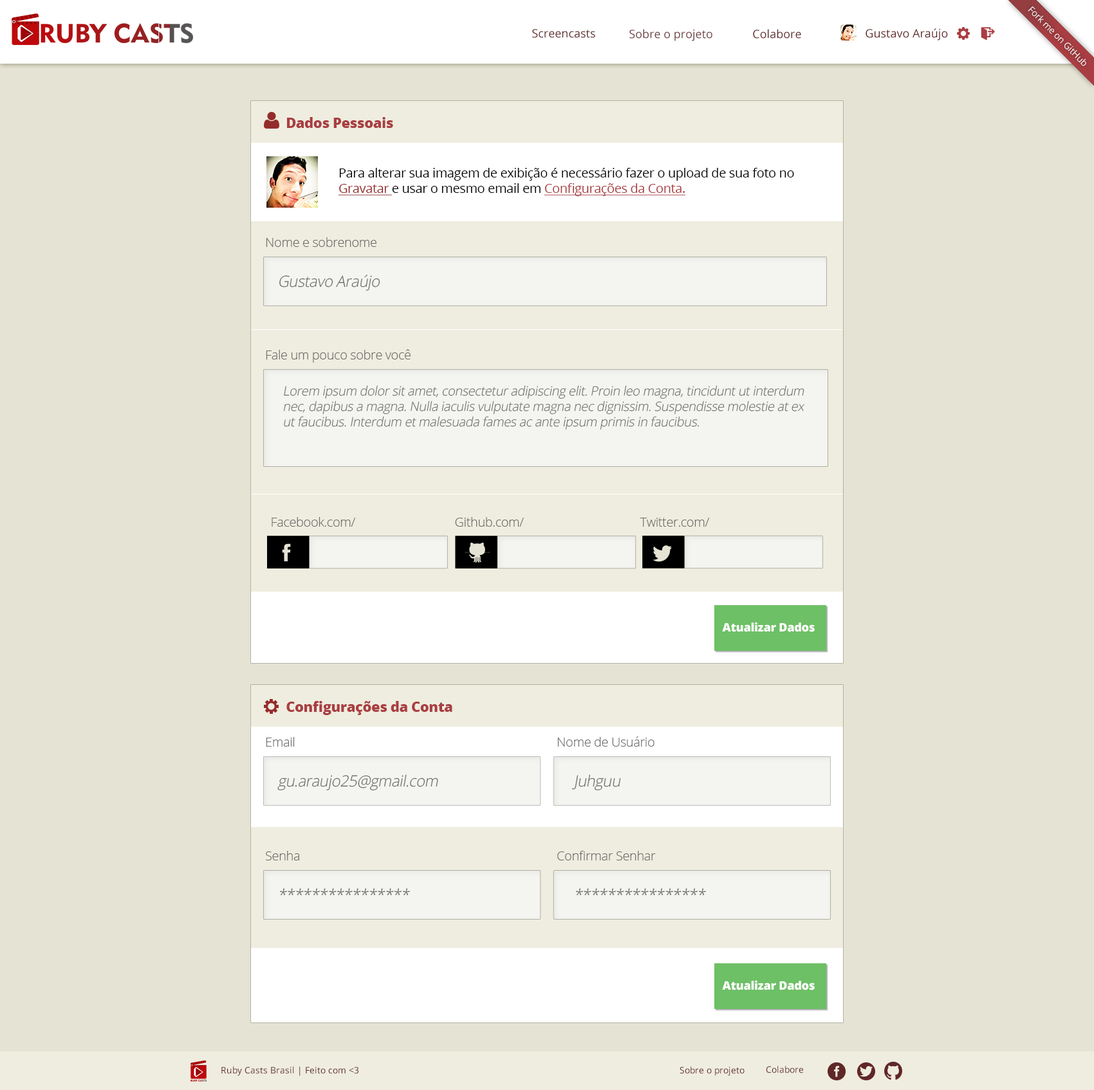
<style>
.page{position:relative;width:1094px;height:1090px;background:#e5e3d3}
.page>*{position:absolute;margin:0}
.t1{font:11.6px "OpenSans";color:#602728}
.t2{font:11.6px "OpenSans";color:#6d3d3e}
.t3{font:14.2px "OpenSans-Extrabold";letter-spacing:-0.02em;color:#a93e42}
.t4{font:12.9px "OpenSans";letter-spacing:-0.02em;color:#000000}
.t5{font:12.9px "OpenSans";letter-spacing:-0.02em;color:#952c2c;text-decoration:underline}
.t6{font:12.9px "OpenSans";letter-spacing:-0.02em;color:#a93e42;text-decoration:underline}
.t7{font:12.9px "OpenSans-Light";letter-spacing:-0.02em;color:#6c6c6c}
.t8{font:15.4px "OpenSans-Light";letter-spacing:-0.02em;color:#6c6c6c;font-style:italic}
.t9{font:12.9px "OpenSans-Light";letter-spacing:-0.02em;color:#6c6c6c;font-style:italic}
.t10{font:11.7px "OpenSans-Extrabold";letter-spacing:-0.02em;color:#ffffff}
.t11{font:9px "OpenSans";color:#602728}
</style>
<div class="page">
<p class="t1" style="left:532px;top:29px;width:63px;height:9px">Screencasts</p>
<p class="t2" style="left:629px;top:29px;width:83px;height:12px">Sobre o projeto</p>
<p class="t1" style="left:753px;top:29px;width:48px;height:10px">Colabore</p>
<p class="t1" style="left:865px;top:28px;width:83px;height:13px">Gustavo Araújo</p>
<p class="t3" style="left:287px;top:117px;width:106px;height:11px">Dados Pessoais</p>
<p class="t4" style="left:338px;top:168px;width:456px;height:28px">Para alterar sua imagem de exibição é necessário fazer o upload de sua foto no<br><span class="t5">Gravatar </span>e usar o mesmo email em <span class="t6">Configurações da Conta.</span></p>
<p class="t7" style="left:266px;top:237px;width:110px;height:10px">Nome e sobrenome</p>
<p class="t8" style="left:279px;top:275px;width:101px;height:16px">Gustavo Araújo</p>
<p class="t7" style="left:266px;top:349px;width:144px;height:14px">Fale um pouco sobre você</p>
<p class="t9" style="left:283px;top:385px;width:521px;height:45px">Lorem ipsum dolor sit amet, consectetur adipiscing elit. Proin leo magna, tincidunt ut interdum nec, dapibus a magna. Nulla iaculis vulputate magna nec dignissim. Suspendisse molestie at ex ut faucibus. Interdum et malesuada fames ac ante ipsum primis in faucibus.</p>
<p class="t7" style="left:271px;top:517px;width:85px;height:10px">Facebook.com/</p>
<p class="t7" style="left:455px;top:517px;width:69px;height:10px">Github.com/</p>
<p class="t7" style="left:639px;top:518px;width:71px;height:9px">Twitter.com/</p>
<p class="t10" style="left:722px;top:622px;width:92px;height:10px">Atualizar Dados</p>
<p class="t3" style="left:286px;top:701px;width:166px;height:14px">Configurações da Conta</p>
<p class="t7" style="left:266px;top:737px;width:29px;height:10px">Email</p>
<p class="t7" style="left:557px;top:737px;width:97px;height:10px">Nome de Usuário</p>
<p class="t8" style="left:277px;top:775px;width:161px;height:16px">gu.araujo25@gmail.com</p>
<p class="t8" style="left:571px;top:775px;width:50px;height:16px">Juhguu</p>
<p class="t7" style="left:266px;top:851px;width:33px;height:10px">Senha</p>
<p class="t7" style="left:557px;top:851px;width:99px;height:10px">Confirmar Senhar</p>
<p class="t8" style="left:280px;top:888px;width:130px;height:8px">****************</p>
<p class="t8" style="left:576px;top:888px;width:130px;height:8px">****************</p>
<p class="t10" style="left:722px;top:980px;width:92px;height:11px">Atualizar Dados</p>
<p class="t11" style="left:221px;top:1067px;width:137px;height:9px">Ruby Casts Brasil | Feito com &lt;3</p>
<p class="t11" style="left:679px;top:1067px;width:65px;height:9px">Sobre o projeto</p>
<p class="t11" style="left:766px;top:1066px;width:37px;height:8px">Colabore</p>
</div>
